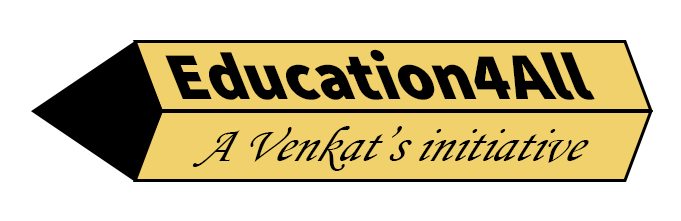
<style>
.page{position:relative;width:681px;height:221px;background:#ffffff}
.page>*{position:absolute;margin:0}
.t1{font:72.2px "SourceSansRoman-Black";color:#000000;scale:0.93 1}
.t2{font:54.5px "MonotypeCorsiva";color:#000000;scale:0.94 1}
</style>
<div class="page">
<p class="t1" style="left:165px;top:49px;width:430px;height:51px">Education4All</p>
<p class="t2" style="left:192px;top:126px;width:397px;height:45px">A Venkat’s initiative</p>
</div>
